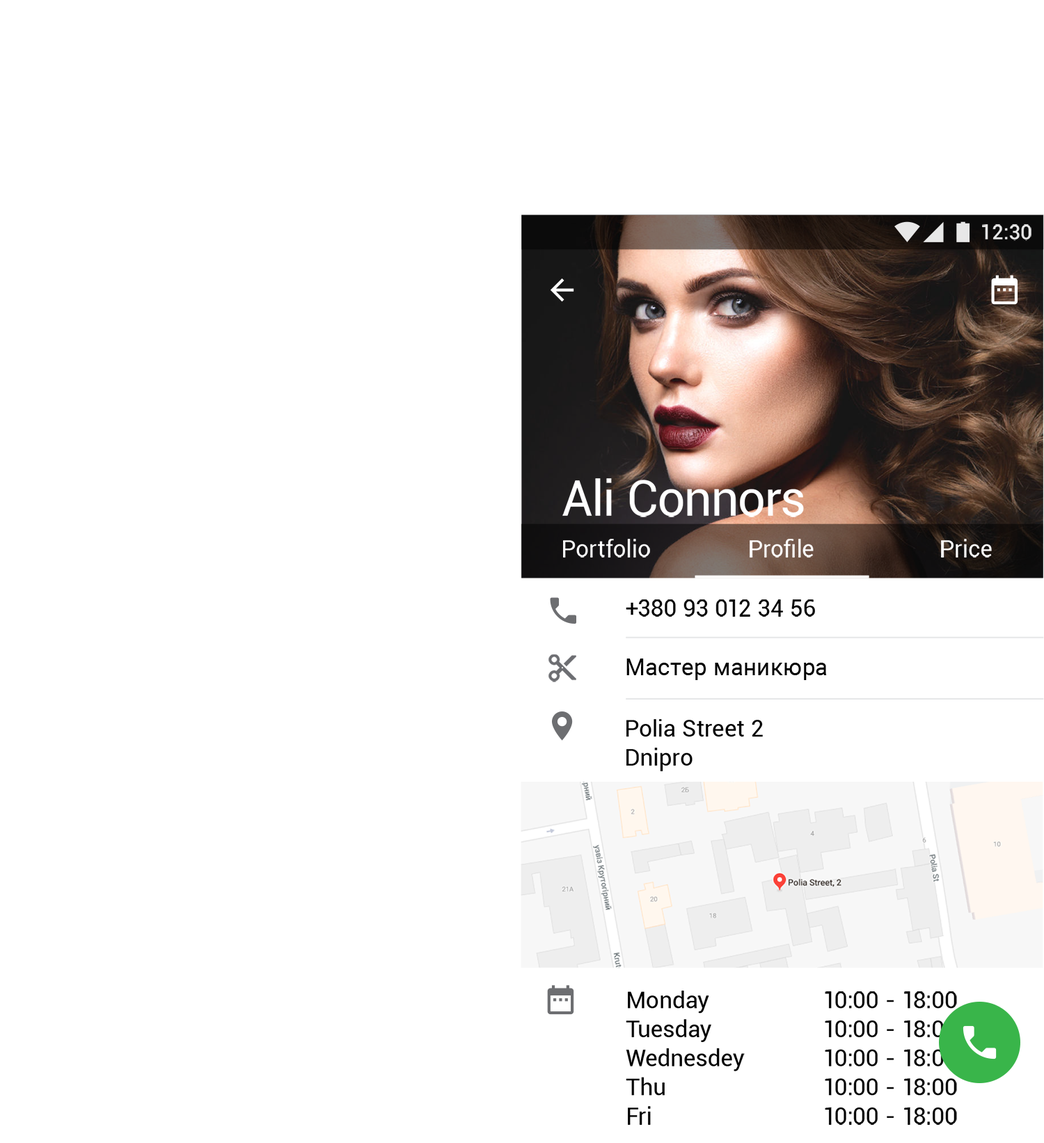
<style>
.page{position:relative;width:1044px;height:1143px;background:#ffffff}
.page>*{position:absolute;margin:0}
.t1{font:20.3px "Roboto-Medium";color:#ffffff}
.t2{font:49.3px "Roboto-Regular";letter-spacing:-0.005em;color:#ffffff}
.t3{font:23.2px "Roboto-Regular";letter-spacing:0.01em;color:#ffffff}
.t4{font:23.2px "Roboto-Regular";letter-spacing:0.01em;color:#000000}
.t5{font:23.2px "Roboto-Regular";letter-spacing:0.01em;color:#010101}
.t6{font:23.2px/23.2px "Roboto-Regular";letter-spacing:0.01em;color:#000000}
.t7{font:23.2px/29px "Roboto-Regular";letter-spacing:0.01em;color:#000000}
.t8{font:23.2px/29px "Roboto-Regular";letter-spacing:0.01em;color:#010101}
</style>
<div class="page">
<p class="t1" style="left:982px;top:224px;width:49px;height:17px">12:30</p>
<p class="t2" style="left:562px;top:478px;width:242px;height:39px">Ali Connors</p>
<p class="t3" style="left:563px;top:539px;width:87px;height:18px">Portfolio</p>
<p class="t3" style="left:749px;top:539px;width:64px;height:18px">Profile</p>
<p class="t3" style="left:941px;top:539px;width:51px;height:18px">Price</p>
<p class="t4" style="left:626px;top:599px;width:189px;height:17px">+380 93 012 34 56</p>
<p class="t5" style="left:626px;top:658px;width:201px;height:22px">Мастер маникюра</p>
<p class="t6" style="left:626px;top:719px;width:137px;height:52px">Polia Street 2<br><span class="t7">Dnipro</span></p>
<p class="t7" style="left:626px;top:990px;width:119px;height:134px">Monday<br>Tuesday<br>Wednesdey<br>Thu<br>Fri</p>
<p class="t8" style="left:825px;top:991px;width:132px;height:133px">10:00 - 18:00<br>10:00 - 18:00<br>10:00 - 18:00<br>10:00 - 18:00<br>10:00 - 18:00</p>
</div>
